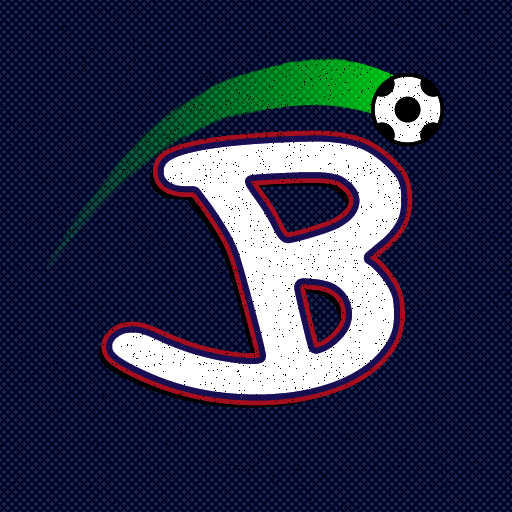
<style>
.page{position:relative;width:512px;height:512px;background:#000323}
.page>*{position:absolute;margin:0}
.t1{font:411.8px "Brutal_bounce-Regular";color:#ffffff;scale:1.29 1}
</style>
<div class="page">
<p class="t1" style="left:106px;top:135px;width:302px;height:266px">B</p>
</div>
